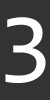
<style>
.page{position:relative;width:50px;height:100px;background:#333333}
.page>*{position:absolute;margin:0}
.t1{font:100px "Consolas";letter-spacing:-0.04em;color:#ffffff}
</style>
<div class="page">
<p class="t1" style="left:5px;top:17px;width:41px;height:66px">3</p>
</div>
